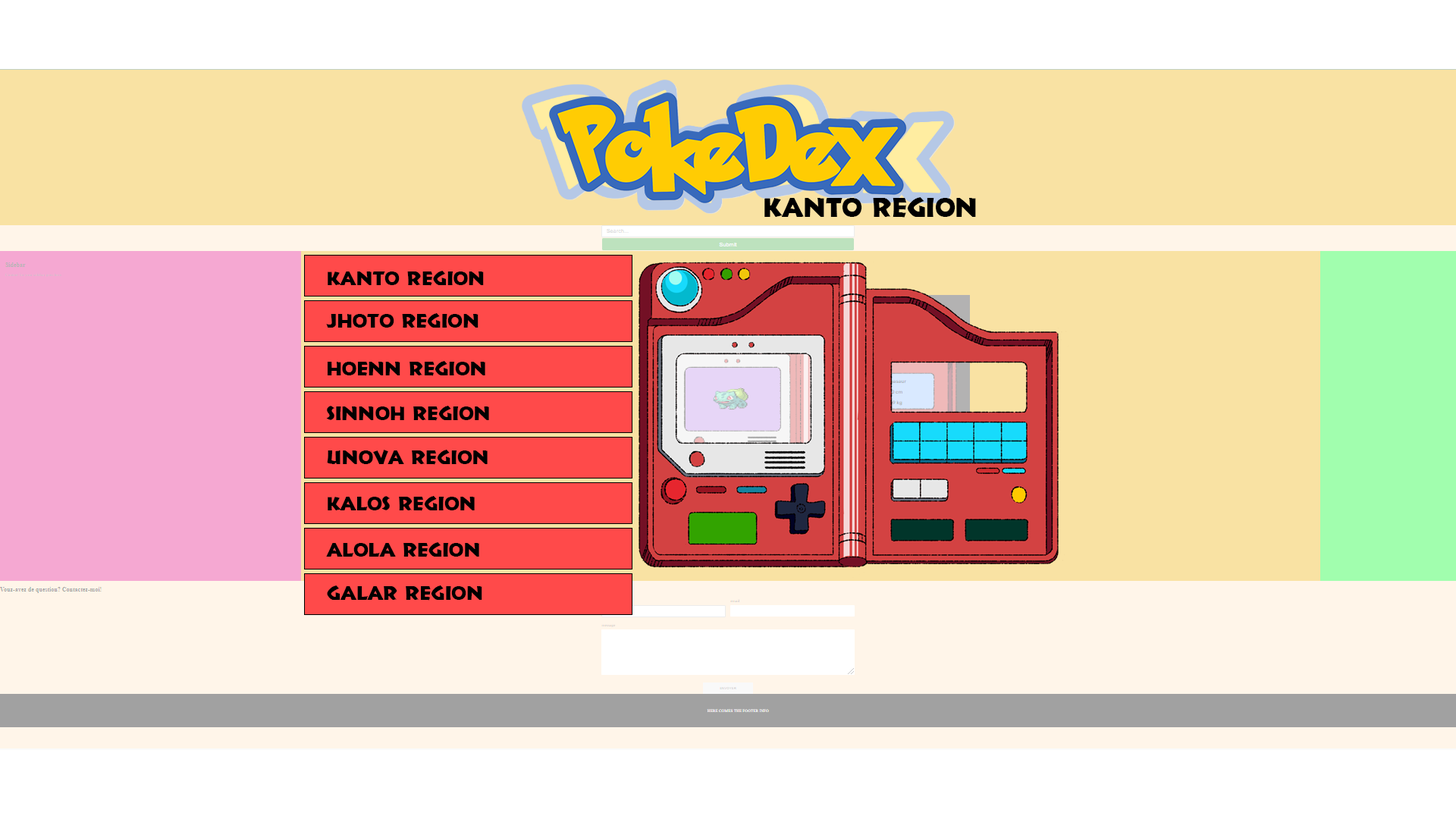
<style>
.page{position:relative;width:1456px;height:819px;background:#f9e2a3}
.page>*{position:absolute;margin:0}
.t1{font:27.3px "Informal011BT-Roman";color:#000000}
.t2{font:20.1px "Informal011BT-Roman";color:#000000}
</style>
<div class="page">
<p class="t1" style="left:764px;top:197px;width:212px;height:21px">kanto region</p>
<p class="t2" style="left:328px;top:271px;width:156px;height:15px">kanto region</p>
<p class="t2" style="left:326px;top:313px;width:153px;height:15px">jhoto region</p>
<p class="t2" style="left:328px;top:361px;width:157px;height:15px">hoenn region</p>
<p class="t2" style="left:327px;top:406px;width:162px;height:15px">sinnoh region</p>
<p class="t2" style="left:327px;top:450px;width:161px;height:15px">Unova region</p>
<p class="t2" style="left:328px;top:496px;width:147px;height:15px">Kalos region</p>
<p class="t2" style="left:326px;top:542px;width:153px;height:15px">Alola region</p>
<p class="t2" style="left:327px;top:585px;width:155px;height:16px">galar region</p>
</div>
